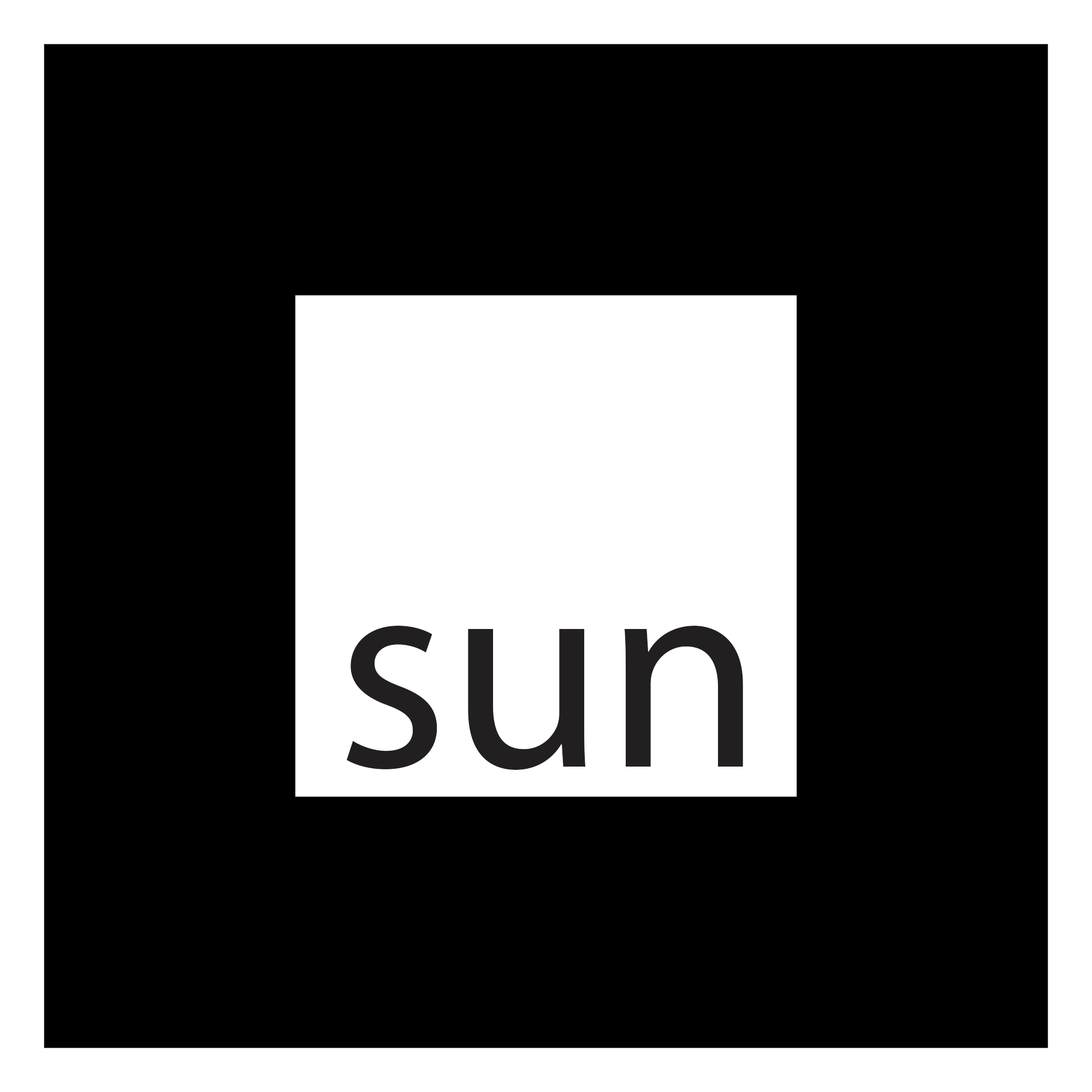
<style>
.page{position:relative;width:1092px;height:1092px;background:#000000}
.page>*{position:absolute;margin:0}
.t1{font:284.5px "MyriadPro-Regular";color:#211f1f}
</style>
<div class="page">
<p class="t1" style="left:346px;top:625px;width:397px;height:145px">sun</p>
</div>
